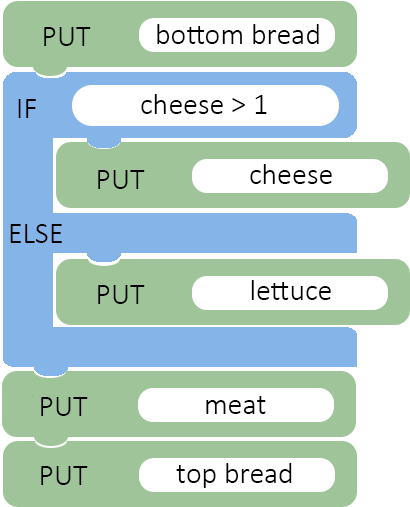
<style>
.page{position:relative;width:410px;height:507px;background:#a0c49a}
.page>*{position:absolute;margin:0}
.t1{font:30px "Calibri-Light";color:#000000}
</style>
<div class="page">
<p class="t1" style="left:44px;top:27px;width:47px;height:19px">PUT</p>
<p class="t1" style="left:157px;top:24px;width:162px;height:20px">bottom bread</p>
<p class="t1" style="left:18px;top:99px;width:18px;height:19px">IF</p>
<p class="t1" style="left:141px;top:94px;width:126px;height:20px">cheese &gt; 1</p>
<p class="t1" style="left:98px;top:170px;width:47px;height:19px">PUT</p>
<p class="t1" style="left:250px;top:164px;width:82px;height:20px">cheese</p>
<p class="t1" style="left:10px;top:224px;width:52px;height:19px">ELSE</p>
<p class="t1" style="left:251px;top:280px;width:80px;height:20px">lettuce</p>
<p class="t1" style="left:98px;top:285px;width:47px;height:19px">PUT</p>
<p class="t1" style="left:41px;top:397px;width:47px;height:19px">PUT</p>
<p class="t1" style="left:206px;top:396px;width:60px;height:18px">meat</p>
<p class="t1" style="left:41px;top:466px;width:47px;height:19px">PUT</p>
<p class="t1" style="left:176px;top:463px;width:116px;height:25px">top bread</p>
</div>
